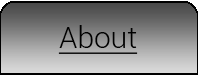
<style>
.page{position:relative;width:198px;height:75px}
.page>*{position:absolute;margin:0}
.t1{font:30px "Roboto-Light";color:#000000;text-decoration:underline}
</style>
<div class="page">
<p class="t1" style="left:58px;top:25px;width:80px;height:29px">About</p>
</div>
